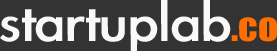
<style>
.page{position:relative;width:277px;height:51px;background:#333333}
.page>*{position:absolute;margin:0}
.t1{font:60px "LiGothicMed";color:#f9f9f9;scale:1.1 1}
.t2{font:36px "Impact";color:#ff6e00;scale:1.1 1}
</style>
<div class="page">
<p class="t1" style="left:0px;top:0px;width:277px;height:51px">startuplab<span class="t2">.co</span></p>
</div>
